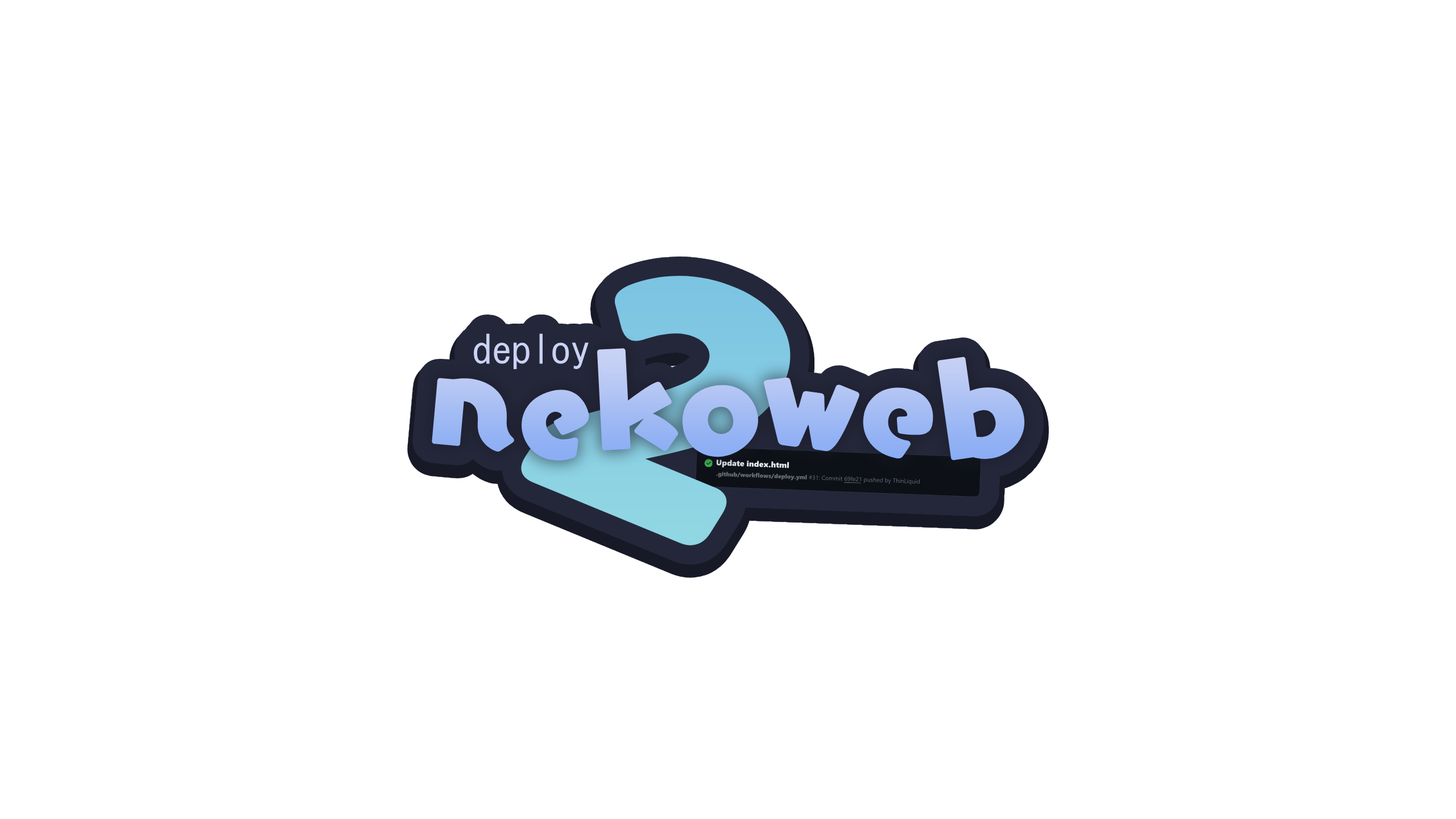
<style>
.page{position:relative;width:1456px;height:819px;background:#ffffff}
.page>*{position:absolute;margin:0}
.t1{font:388.7px "IsidoraSoft-BlackIt"}
.t2{font:39.3px "MS-Gothic";color:#cad3f5}
.t3{font:8px "SegoeUIBlack";color:#e5ecf2}
.t4{font:6px "SegoeUI";color:#656d76}
.t5{font:6px "SegoeUIBlack";color:#656d76}
</style>
<div class="page">
<p class="t1" style="left:518px;top:271px;width:283px;height:277px;rotate:22deg">2</p>
<p class="t2" style="left:474px;top:333px;width:115px;height:36px">deploy</p>
<p class="t3" style="left:716px;top:460px;width:73px;height:8px;rotate:2deg">Update index.html</p>
<p class="t4" style="left:716px;top:471px;width:204px;height:14px;rotate:2deg"><span class="t5">.github/workflows/deploy.yml </span>#31: Commit 69fe21 pushed by ThinLiquid</p>
</div>
